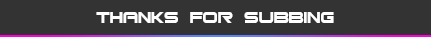
<style>
.page{position:relative;width:431px;height:37px;background:#333333}
.page>*{position:absolute;margin:0}
.t1{font:22px "Bitsumishi";color:#ffffff}
</style>
<div class="page">
<p class="t1" style="left:96px;top:12px;width:238px;height:11px">THANKS FOR SUBBING</p>
</div>
